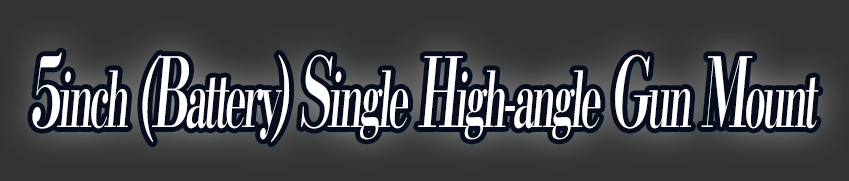
<style>
.page{position:relative;width:849px;height:181px;background:#333333}
.page>*{position:absolute;margin:0}
.t1{font:76.8px "KochoStd-Heavy";letter-spacing:-0.08em;color:#ffffff;font-style:italic;scale:0.51 1}
.t2{font:96px "KochoStd-Heavy";letter-spacing:-0.08em;color:#ffffff;font-style:italic;scale:0.51 1}
</style>
<div class="page">
<p class="t1" style="left:32px;top:52px;width:787px;height:91px"><span class="t2">5</span>inch<span class="t2"> (B</span>attery<span class="t2">) S</span>ingle<span class="t2"> H</span>igh-angle<span class="t2"> G</span>un<span class="t2"> M</span>ount</p>
</div>
